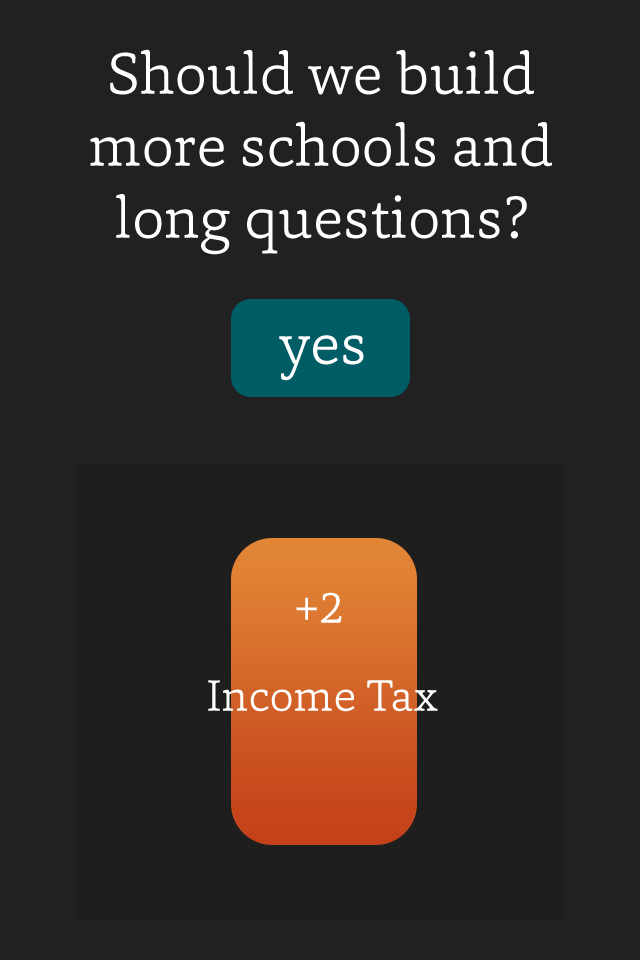
<style>
.page{position:relative;width:640px;height:960px;background:#212121}
.page>*{position:absolute;margin:0}
.t1{font:60px "Capita-Light";color:#ffffff}
.t2{font:45px "Capita-Light";color:#ffffff}
</style>
<div class="page">
<p class="t1" style="left:90px;top:49px;width:462px;height:206px;text-align:center">Should we build more schools and long questions?</p>
<p class="t1" style="left:279px;top:335px;width:85px;height:46px">yes</p>
<p class="t2" style="left:296px;top:592px;width:46px;height:31px">+2</p>
<p class="t2" style="left:208px;top:680px;width:230px;height:32px">Income Tax</p>
</div>
